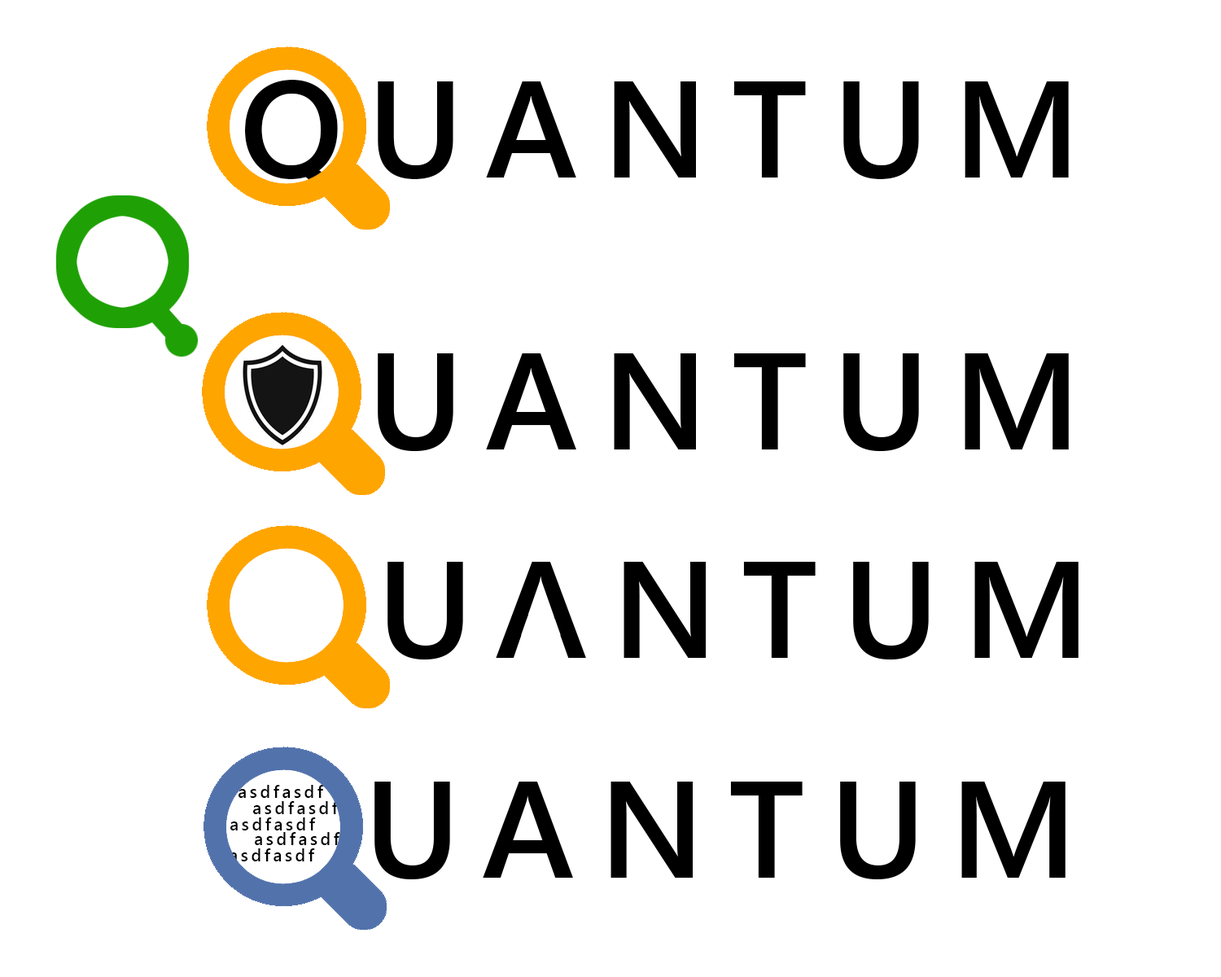
<style>
.page{position:relative;width:1221px;height:977px;background:#ffffff}
.page>*{position:absolute;margin:0}
.t1{font:137.9px "SegoeUI-Semibold";letter-spacing:0.175em;color:#010101}
.t2{font:17px "SegoeUI-Semibold";letter-spacing:0.175em;color:#000000}
</style>
<div class="page">
<p class="t1" style="left:245px;top:80px;width:824px;height:110px">QUANTUM</p>
<p class="t2" style="left:238px;top:785px;width:86px;height:13px">asdfasdf</p>
<p class="t2" style="left:253px;top:801px;width:86px;height:13px">asdfasdf</p>
<p class="t2" style="left:230px;top:817px;width:86px;height:13px">asdfasdf</p>
<p class="t2" style="left:255px;top:832px;width:85px;height:13px">asdfasdf</p>
<p class="t2" style="left:230px;top:848px;width:85px;height:13px">asdfasdf</p>
</div>
